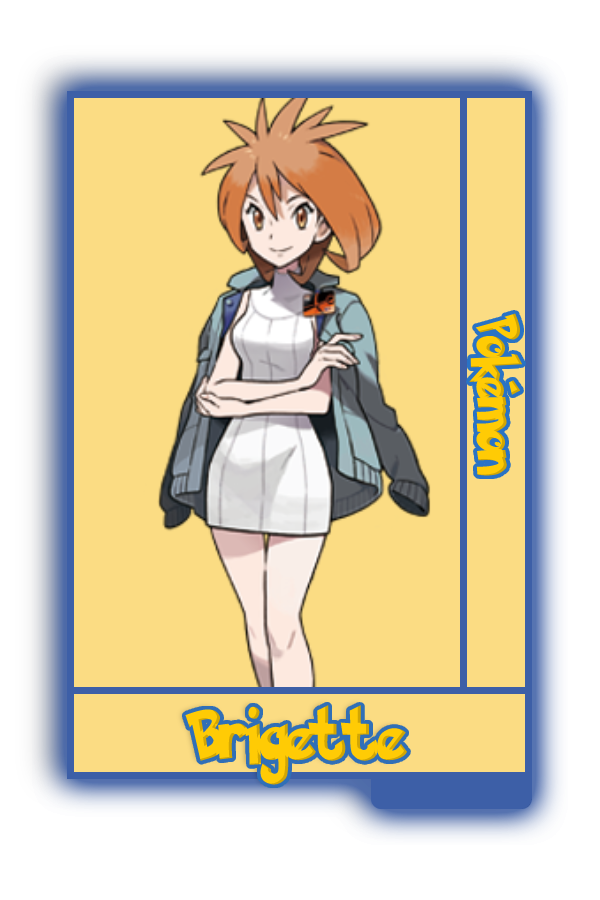
<style>
.page{position:relative;width:600px;height:900px;background:#fbdc83}
.page>*{position:absolute;margin:0}
.t1{font:48.8px "PokemonSolidNormal";color:#ffcb05;scale:0.8 1}
.t2{font:56.6px "PokemonSolidNormal";color:#ffcb05;scale:0.92 1}
</style>
<div class="page">
<p class="t1" style="left:469px;top:313px;width:54px;height:163px;rotate:90deg">Pokémon</p>
<p class="t2" style="left:185px;top:705px;width:223px;height:80px">Brigette</p>
</div>
